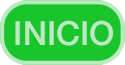
<style>
.page{position:relative;width:125px;height:65px;background:#19c42d}
.page>*{position:absolute;margin:0}
.t1{font:33.3px "HelveticaNeue-Medium";color:#bceac0}
</style>
<div class="page">
<p class="t1" style="left:15px;top:20px;width:98px;height:26px">INICIO</p>
</div>
